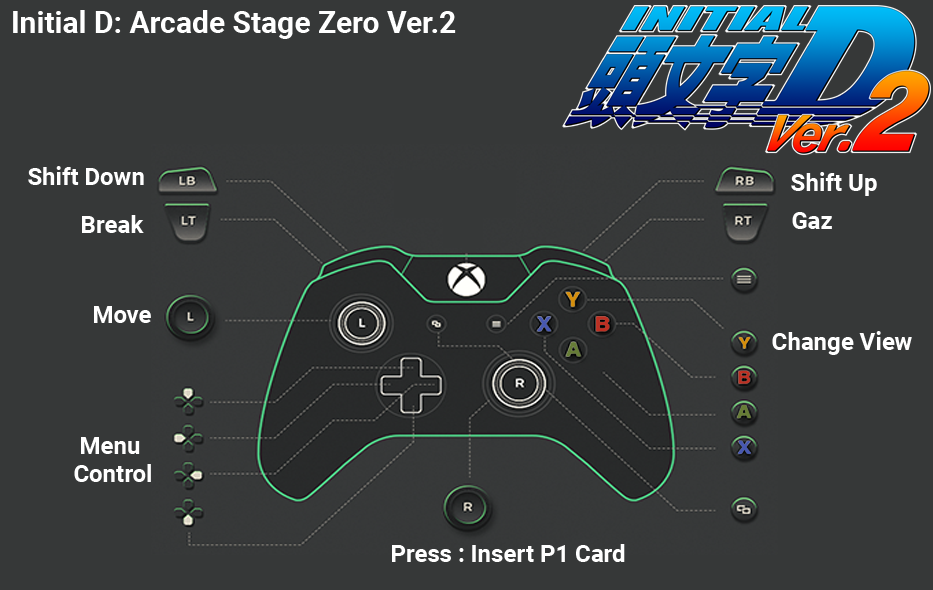
<style>
.page{position:relative;width:933px;height:590px;background:#363838}
.page>*{position:absolute;margin:0}
.t1{font:30px "Roboto-Bold";color:#ffffff}
.t2{font:24px "Roboto-Bold";color:#ffffff}
.t3{font:24px/28px "Roboto-Bold";color:#ffffff}
</style>
<div class="page">
<p class="t1" style="left:13px;top:10px;width:443px;height:29px">Initial D: Arcade Stage Zero Ver.2</p>
<p class="t2" style="left:28px;top:166px;width:116px;height:19px">Shift Down</p>
<p class="t2" style="left:791px;top:172px;width:86px;height:24px">Shift Up</p>
<p class="t2" style="left:82px;top:215px;width:62px;height:18px">Break</p>
<p class="t2" style="left:792px;top:212px;width:40px;height:17px">Gaz</p>
<p class="t2" style="left:94px;top:306px;width:57px;height:17px">Move</p>
<p class="t2" style="left:772px;top:331px;width:140px;height:24px">Change View</p>
<p class="t3" style="left:74px;top:437px;width:77px;height:45px;text-align:center">Menu <br>Control</p>
<p class="t2" style="left:392px;top:544px;width:233px;height:18px">Press : Insert P1 Card</p>
</div>
